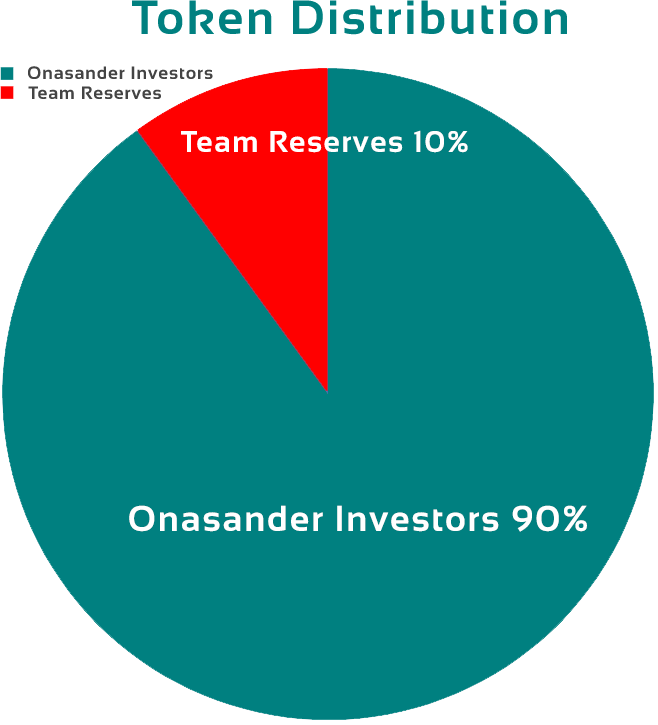
<style>
.page{position:relative;width:658px;height:725px;background:#008080}
.page>*{position:absolute;margin:0}
.t1{font:48px "Sansation-Bold";letter-spacing:0.05em;color:#008080}
.t2{font:18px "Sansation-Bold";letter-spacing:0.05em;color:#444444}
.t3{font:30px "Sansation-Bold";letter-spacing:0.05em;color:#ffffff}
.t4{font:36px "Sansation-Bold";letter-spacing:0.05em;color:#ffffff}
</style>
<div class="page">
<p class="t1" style="left:132px;top:0px;width:435px;height:35px">Token Distribution</p>
<p class="t2" style="left:28px;top:66px;width:185px;height:13px">Onasander Investors</p>
<p class="t2" style="left:28px;top:86px;width:133px;height:13px">Team Reserves</p>
<p class="t3" style="left:181px;top:130px;width:287px;height:23px">Team Reserves 10%</p>
<p class="t4" style="left:129px;top:505px;width:458px;height:27px">Onasander Investors 90%</p>
</div>
